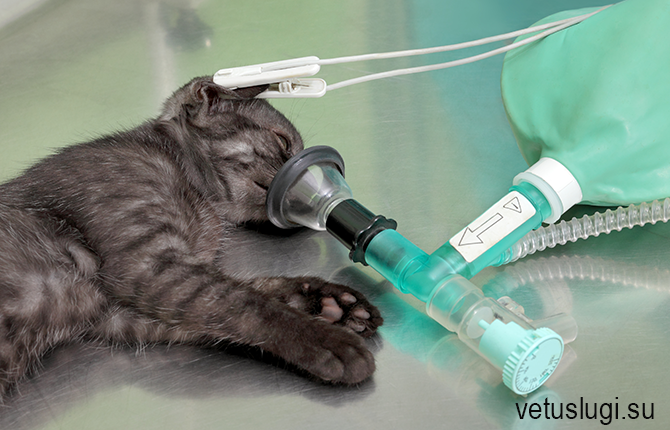
<style>
.page{position:relative;width:670px;height:430px}
.page>*{position:absolute;margin:0}
.t1{font:31.1px "ArialNarrow";letter-spacing:0.002em;color:#090909;scale:1.04 1}
</style>
<div class="page">
<p class="t1" style="left:515px;top:397px;width:139px;height:28px">vetuslugi.su</p>
</div>
